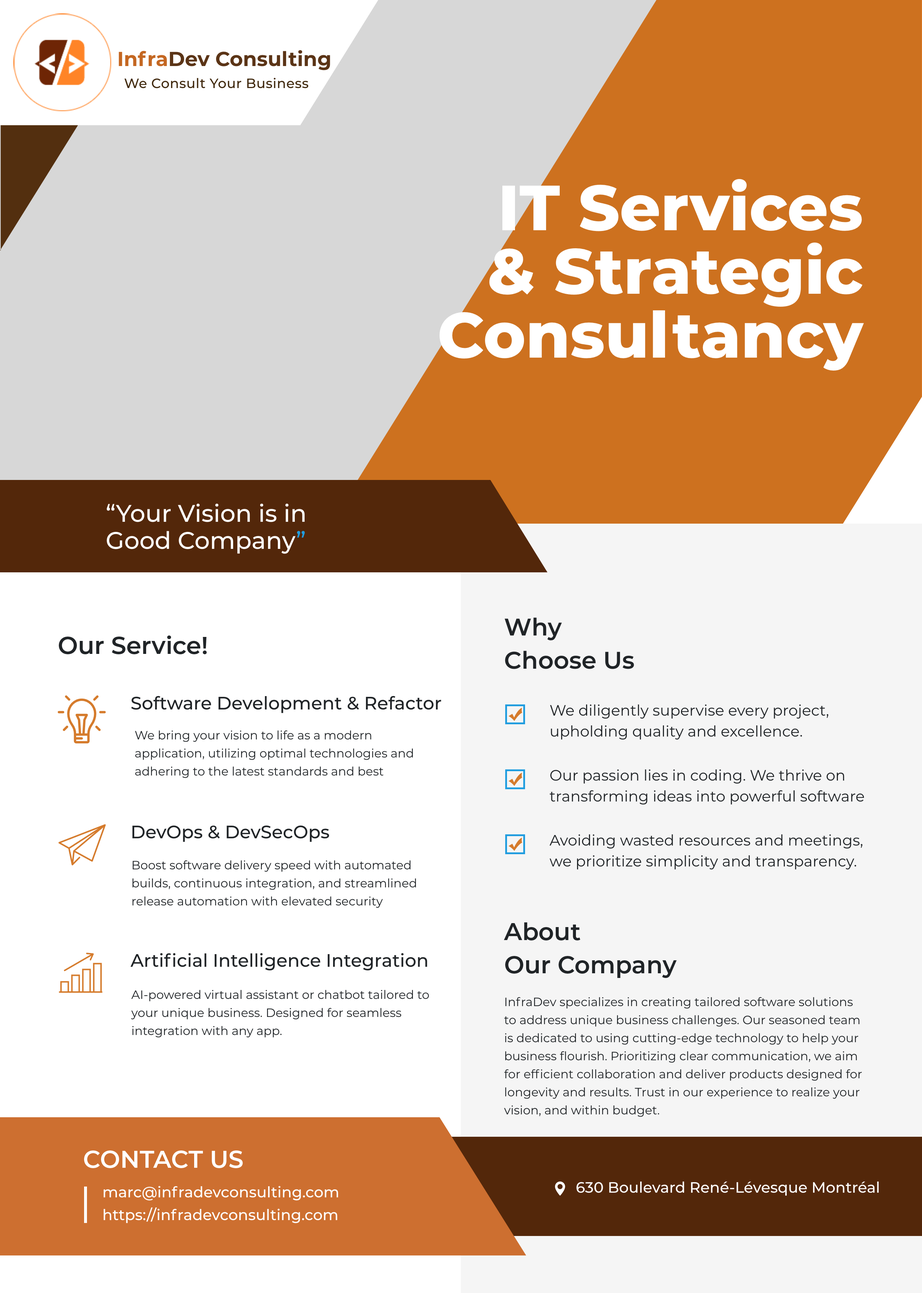
<style>
.page{position:relative;width:922px;height:1293px;background:#ffffff}
.page>*{position:absolute;margin:0}
.t1{font:20.2px "Montserrat-Bold";color:#5b3416}
.t2{font:20.2px "Montserrat-Bold";color:#c46722}
.t3{font:13.5px "Montserrat-Medium";letter-spacing:0.02em;color:#40290e}
.t4{font:63.7px/63.7px "Montserrat-ExtraBold";color:#ffffff}
.t5{font:24.1px/27.1px "Montserrat-Medium";color:#ffffff}
.t6{font:24.1px/27.1px "Montserrat-Medium";color:#219ee0}
.t7{font:24.1px/33.1px "Montserrat-SemiBold";color:#202427}
.t8{font:24.1px "Montserrat-SemiBold";color:#202427}
.t9{font:18px "Montserrat-Medium";color:#202427}
.t10{font:15px/21.1px "Montserrat-Regular";color:#202427}
.t11{font:12px/18px "Montserrat-Regular";color:#202427}
.t12{font:24.1px "Montserrat-SemiBold";color:#ffffff;text-transform:uppercase}
.t13{font:15px "Montserrat-Medium";color:#ffffff}
</style>
<div class="page">
<p class="t1" style="left:119px;top:50px;width:211px;height:20px"><span class="t2">Infra</span>Dev Consulting</p>
<p class="t3" style="left:124px;top:78px;width:185px;height:10px">We Consult Your Business</p>
<p class="t4" style="left:439px;top:179px;width:425px;height:192px;text-align:right">IT Services<br>&amp; Strategic<br>Consultancy</p>
<p class="t5" style="left:106px;top:503px;width:199px;height:51px">“Your Vision is in <br>Good Company<span class="t6">”</span></p>
<p class="t7" style="left:505px;top:618px;width:129px;height:51px">Why<br>Choose Us</p>
<p class="t8" style="left:59px;top:636px;width:148px;height:18px">Our Service!</p>
<p class="t9" style="left:131px;top:696px;width:310px;height:17px">Software Development &amp; Refactor</p>
<p class="t10" style="left:550px;top:704px;width:279px;height:36px">We diligently supervise every project,<br>upholding quality and excellence.</p>
<p class="t11" style="left:135px;top:730px;width:278px;height:48px">We bring your vision to life as a modern application, utilizing optimal technologies and adhering to the latest standards and best practices.</p>
<p class="t10" style="left:550px;top:769px;width:314px;height:36px">Our passion lies in coding. We thrive on <br>transforming ideas into powerful software</p>
<p class="t9" style="left:132px;top:825px;width:197px;height:17px">DevOps &amp; DevSecOps</p>
<p class="t10" style="left:549px;top:834px;width:314px;height:36px">Avoiding wasted resources and meetings, <br>we prioritize simplicity and transparency.</p>
<p class="t11" style="left:132px;top:860px;width:284px;height:48px">Boost software delivery speed with automated builds, continuous integration, and streamlined release automation with elevated security</p>
<p class="t7" style="left:504px;top:922px;width:173px;height:56px">About<br>Our Company</p>
<p class="t9" style="left:130px;top:953px;width:297px;height:17px">Artificial Intelligence Integration</p>
<p class="t11" style="left:131px;top:990px;width:298px;height:48px">AI-powered virtual assistant or chatbot tailored to your unique business. Designed for seamless integration with any app.</p>
<p class="t11" style="left:504px;top:997px;width:358px;height:120px">InfraDev specializes in creating tailored software solutions to address unique business challenges. Our seasoned team is dedicated to using cutting-edge technology to help your business flourish. Prioritizing clear communication, we aim for efficient collaboration and deliver products designed for longevity and results. Trust in our experience to realize your vision, and within budget.</p>
<p class="t12" style="left:84px;top:1151px;width:159px;height:17px">Contact US</p>
<p class="t13" style="left:576px;top:1182px;width:303px;height:14px">630 Boulevard René-Lévesque Montréal</p>
<p class="t13" style="left:104px;top:1186px;width:234px;height:15px">marc@infradevconsulting.com</p>
<p class="t13" style="left:104px;top:1207px;width:233px;height:16px">https://infradevconsulting.com</p>
</div>
